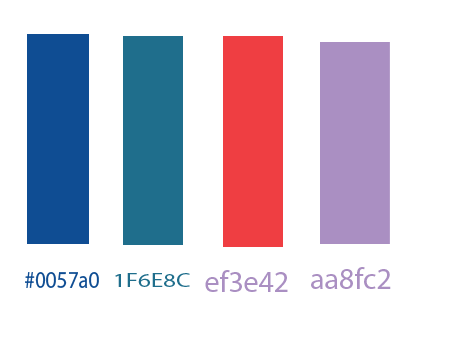
<style>
.page{position:relative;width:454px;height:340px;background:#ffffff}
.page>*{position:absolute;margin:0}
.t1{font:30px "MyriadPro-Regular";color:#aa8fc2}
.t2{font:24.6px "MyriadPro-Regular";color:#0f4d93;scale:0.86 1}
.t3{font:20.2px "MyriadPro-Regular";color:#1f6e8c;scale:1.24 1}
</style>
<div class="page">
<p class="t1" style="left:205px;top:270px;width:83px;height:22px">ef3e42</p>
<p class="t1" style="left:311px;top:267px;width:80px;height:22px">aa8fc2</p>
<p class="t2" style="left:25px;top:272px;width:74px;height:16px">#0057a0</p>
<p class="t3" style="left:115px;top:273px;width:75px;height:14px">1F6E8C</p>
</div>
